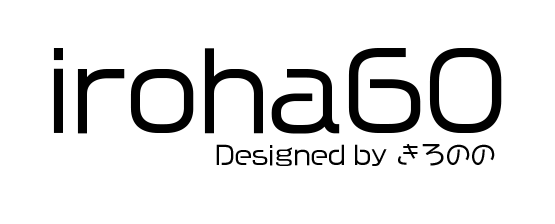
<style>
.page{position:relative;width:555px;height:224px;background:#ffffff}
.page>*{position:absolute;margin:0}
.t1{font:104.2px "VDL-MegaG-Regular";color:#000000}
.t2{font:25px "VDL-MegaG-Regular";color:#000000}
</style>
<div class="page">
<p class="t1" style="left:53px;top:48px;width:449px;height:86px">iroha60</p>
<p class="t2" style="left:216px;top:144px;width:279px;height:22px">Designed by きろのの</p>
</div>
